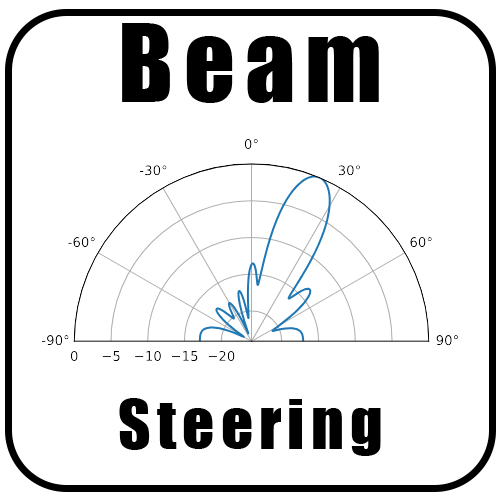
<style>
.page{position:relative;width:500px;height:500px;background:#ffffff}
.page>*{position:absolute;margin:0}
.t1{font:100px "Impact";letter-spacing:0.1em;color:#000000}
.t2{font:62.5px "Impact";letter-spacing:0.1em;color:#000000}
</style>
<div class="page">
<p class="t1" style="left:122px;top:23px;width:257px;height:80px">Beam</p>
<p class="t2" style="left:119px;top:398px;width:262px;height:58px">Steering</p>
</div>
